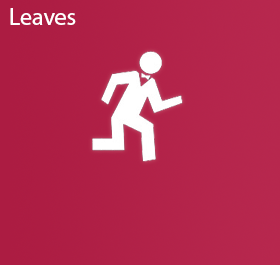
<style>
.page{position:relative;width:280px;height:265px}
.page>*{position:absolute;margin:0}
.t1{font:24px "MyriadHebrew-Regular";color:#fefefe}
</style>
<div class="page">
<p class="t1" style="left:10px;top:8px;width:66px;height:17px">Leaves</p>
</div>
